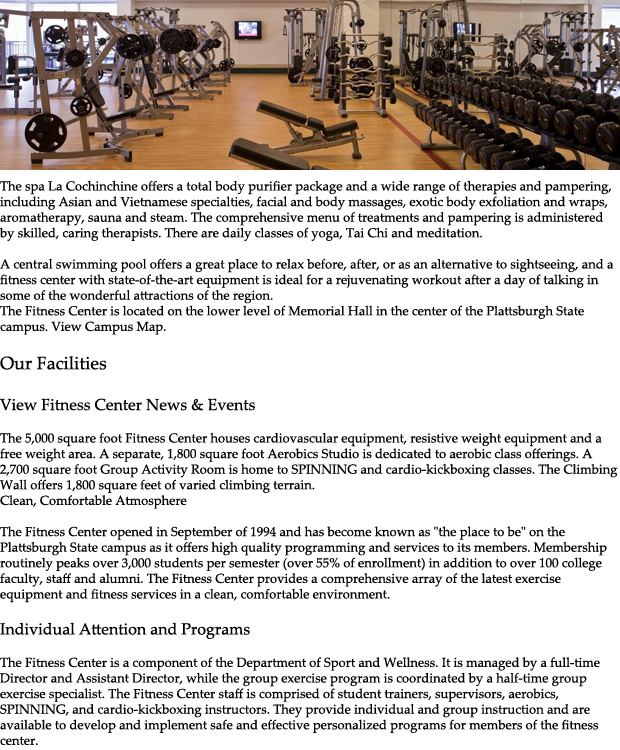
<style>
.page{position:relative;width:620px;height:750px;background:#ffffff}
.page>*{position:absolute;margin:0}
.t1{font:13px "PalatinoLinotype-Roman";color:#000000}
.t2{font:18px "PalatinoLinotype-Roman";color:#000000}
.t3{font:16px "PalatinoLinotype-Roman";color:#000000}
</style>
<div class="page">
<p class="t1" style="left:0px;top:180px;width:618px;height:566px">The spa La Cochinchine offers a total body purifier package and a wide range of therapies and pampering, including Asian and Vietnamese specialties, facial and body massages, exotic body exfoliation and wraps, aromatherapy, sauna and steam. The comprehensive menu of treatments and pampering is administered by skilled, caring therapists. There are daily classes of yoga, Tai Chi and meditation.<br><br>A central swimming pool offers a great place to relax before, after, or as an alternative to sightseeing, and a fitness center with state-of-the-art equipment is ideal for a rejuvenating workout after a day of talking in some of the wonderful attractions of the region.<br>The Fitness Center is located on the lower level of Memorial Hall in the center of the Plattsburgh State campus. View Campus Map.<br><br><span class="t2">Our Facilities<br><br></span><span class="t3">View Fitness Center News &amp; Events<br><br></span>The 5,000 square foot Fitness Center houses cardiovascular equipment, resistive weight equipment and a free weight area. A separate, 1,800 square foot Aerobics Studio is dedicated to aerobic class offerings. A 2,700 square foot Group Activity Room is home to SPINNING and cardio-kickboxing classes. The Climbing Wall offers 1,800 square feet of varied climbing terrain.<br>Clean, Comfortable Atmosphere<br><br>The Fitness Center opened in September of 1994 and has become known as "the place to be" on the Plattsburgh State campus as it offers high quality programming and services to its members. Membership routinely peaks over 3,000 students per semester (over 55% of enrollment) in addition to over 100 college faculty, staff and alumni. The Fitness Center provides a comprehensive array of the latest exercise equipment and fitness services in a clean, comfortable environment.<br><br><span class="t3">Individual Attention and Programs<br><br></span>The Fitness Center is a component of the Department of Sport and Wellness. It is managed by a full-time Director and Assistant Director, while the group exercise program is coordinated by a half-time group exercise specialist. The Fitness Center staff is comprised of student trainers, supervisors, aerobics, SPINNING, and cardio-kickboxing instructors. They provide individual and group instruction and are available to develop and implement safe and effective personalized programs for members of the fitness center.</p>
</div>
